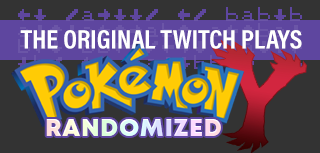
<style>
.page{position:relative;width:320px;height:153px;background:#333333}
.page>*{position:absolute;margin:0}
.t1{font:27px "AcuminProCond-Bold";color:#ffffff}
.t2{font:23.8px "Mont-HeavyDEMO";letter-spacing:0.05em}
</style>
<div class="page">
<p class="t1" style="left:20px;top:30px;width:282px;height:19px">THE ORIGINAL TWITCH PLAYS</p>
<p class="t2" style="left:46px;top:119px;width:175px;height:17px">RANDOMIZED</p>
</div>
